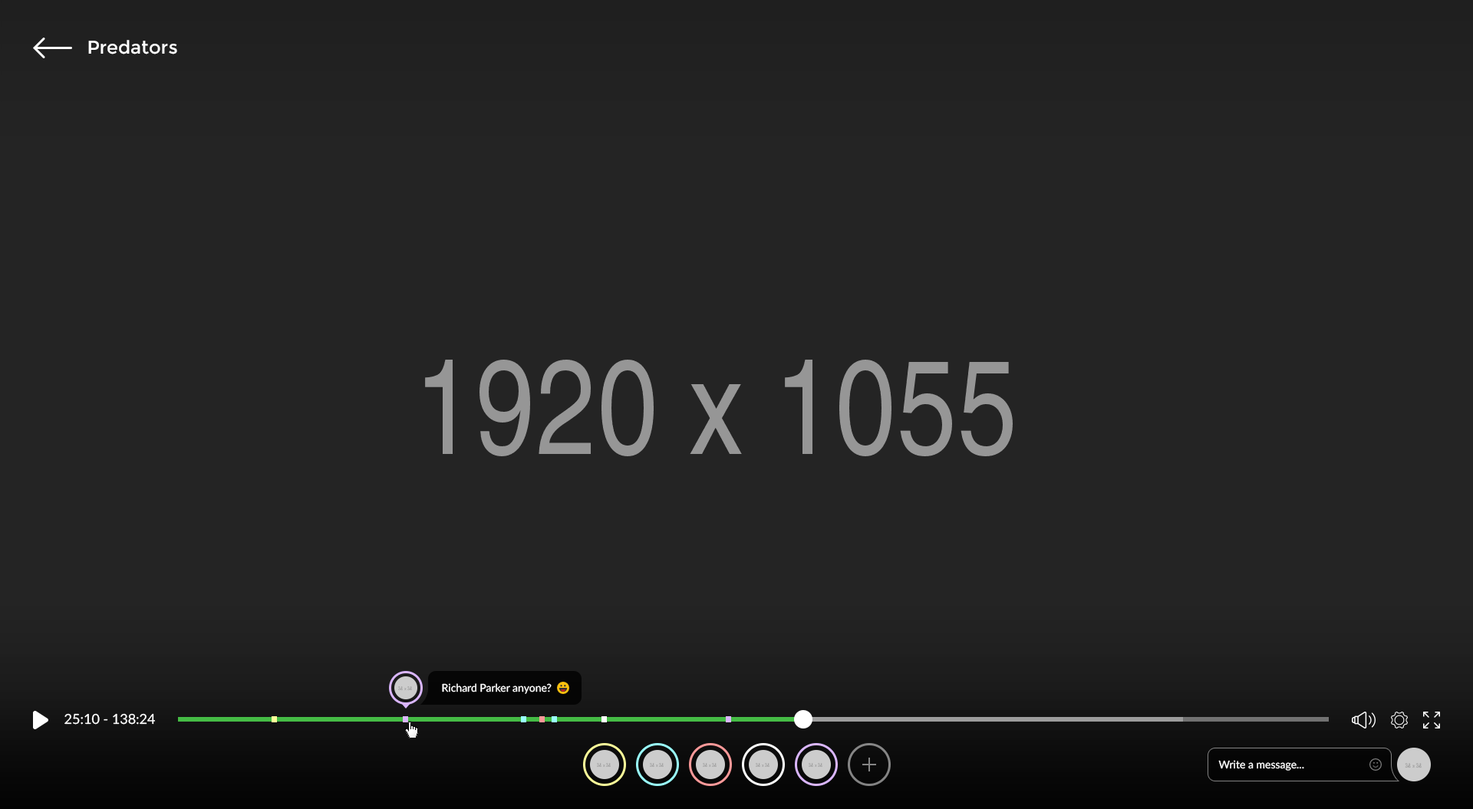
<style>
.page{position:relative;width:1473px;height:809px;background:#242424}
.page>*{position:absolute;margin:0}
.t1{font:18.4px "Montserrat-Regular";color:#ffffff}
.t2{font:10.7px "Lato-Regular";color:#ffffff}
.t3{font:13.8px "Lato-Regular";color:#ffffff}
</style>
<div class="page">
<p class="t1" style="left:88px;top:40px;width:89px;height:14px">Predators</p>
<p class="t2" style="left:442px;top:684px;width:110px;height:10px">Richard Parker anyone?</p>
<p class="t3" style="left:64px;top:714px;width:91px;height:11px">25:10 - 138:24</p>
<p class="t2" style="left:1218px;top:760px;width:86px;height:11px">Write a message...</p>
</div>
